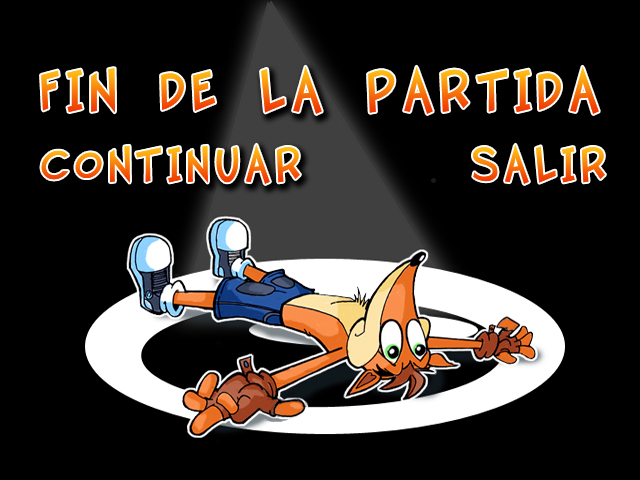
<style>
.page{position:relative;width:640px;height:480px;background:#000000}
.page>*{position:absolute;margin:0}
.t1{font:60px "TwelveTonGoldfishALT";letter-spacing:0.1em}
.t2{font:50px "TwelveTonGoldfishALT";letter-spacing:0.1em}
</style>
<div class="page">
<p class="t1" style="left:41px;top:66px;width:558px;height:48px">FIN DE LA PARTIDA</p>
<p class="t2" style="left:41px;top:144px;width:259px;height:40px">CONTINUAR</p>
<p class="t2" style="left:473px;top:144px;width:132px;height:40px">SALIR</p>
</div>
